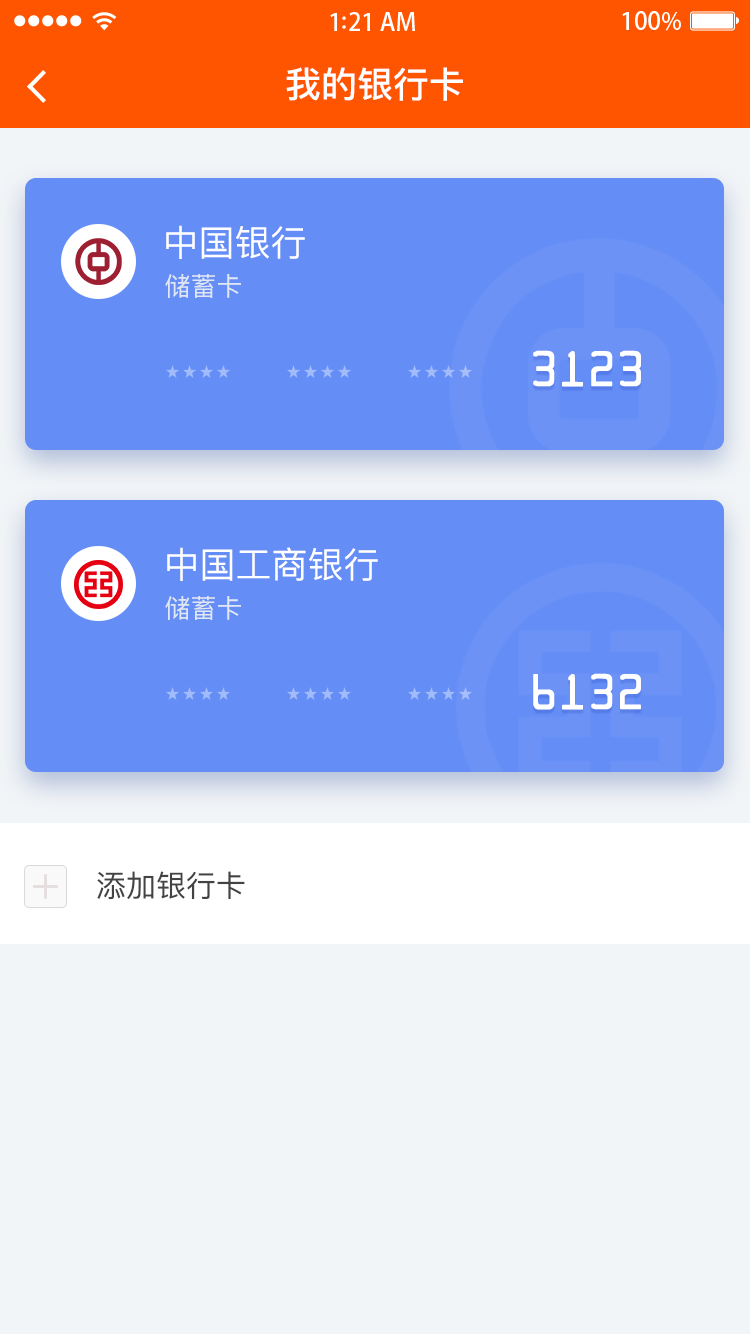
<style>
.page{position:relative;width:750px;height:1334px;background:#f2f5f7}
.page>*{position:absolute;margin:0}
.t1{font:36px "PingFangSC-Medium";color:#ffffff}
.t2{font:36px "PingFangSC-Regular";color:#ffffff}
.t3{font:26px "PingFangSC-Regular";color:#e0e7f3}
.t4{font:32px "Farrington-7B-Qiqi-";letter-spacing:0.22em;color:#ffffff}
.t5{font:30px "PingFangSC-Regular";color:#434343}
</style>
<div class="page">
<p class="t1" style="left:286px;top:67px;width:177px;height:34px">我的银行卡</p>
<p class="t2" style="left:166px;top:225px;width:139px;height:34px">中国银行</p>
<p class="t3" style="left:165px;top:274px;width:76px;height:24px">储蓄卡</p>
<p class="t4" style="left:533px;top:350px;width:108px;height:37px">3123</p>
<p class="t2" style="left:167px;top:547px;width:211px;height:34px">中国工商银行</p>
<p class="t3" style="left:165px;top:596px;width:76px;height:24px">储蓄卡</p>
<p class="t4" style="left:533px;top:673px;width:108px;height:37px">6132</p>
<p class="t5" style="left:97px;top:871px;width:148px;height:29px">添加银行卡</p>
</div>
